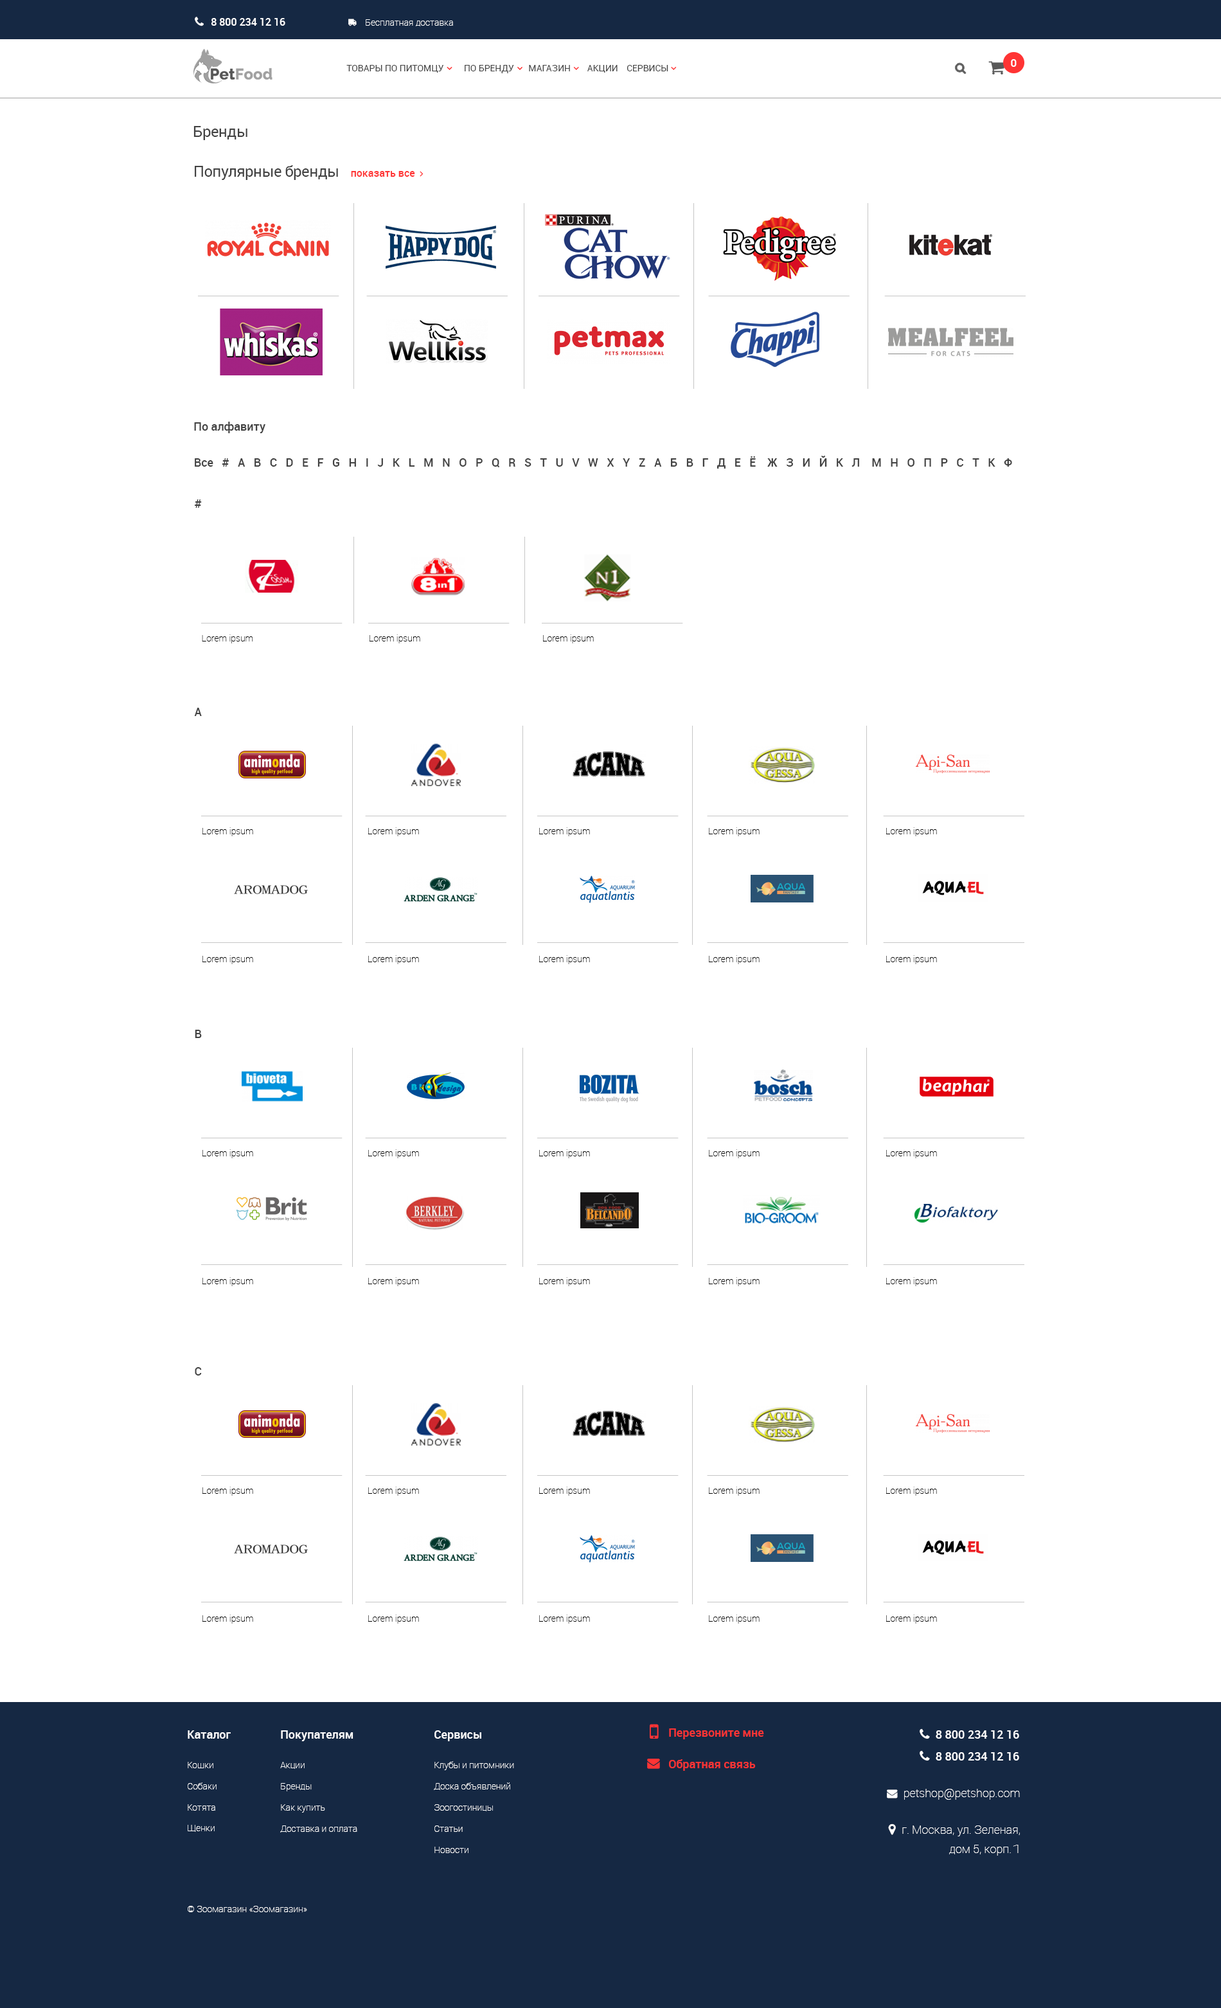
<style>
.page{position:relative;width:1221px;height:2008px;background:#ffffff}
.page>*{position:absolute;margin:0}
.t1{font:10.3px "Roboto-Medium";color:#ffffff}
.t2{font:9px "Roboto-Thin";color:#ffffff}
.t3{font:10.9px "Roboto-Light";color:#ffffff}
.t4{font:15.4px "Roboto-Regular";letter-spacing:-0.02em;color:#424242}
.t5{font:11.6px "Roboto-Medium";color:#424242}
.t6{font:11.6px "Roboto-Medium";color:#424242;text-transform:uppercase}
.t7{font:9px "Roboto-Thin";color:#000000}
.t8{font:9px/21.1px "Roboto-Thin";color:#ffffff}
.t9{font:11.6px/16.6px "Roboto-Medium";color:#ffffff}
.t10{font:9px/29.5px "Roboto-Thin";color:#ffffff}
.t11{font:9px/21.2px "Roboto-Thin";color:#ffffff}
.t12{font:9px/29.6px "Roboto-Thin";color:#ffffff}
.t13{font:11.6px "Roboto-Medium";color:#ff3434}
</style>
<div class="page">
<p class="t1" style="left:211px;top:18px;width:74px;height:8px">8 800 234 12 16</p>
<p class="t2" style="left:366px;top:19px;width:87px;height:7px">Бесплатная доставка</p>
<p class="t3" style="left:1011px;top:59px;width:6px;height:8px">0</p>
<p class="t4" style="left:194px;top:126px;width:54px;height:14px">Бренды</p>
<p class="t4" style="left:195px;top:165px;width:143px;height:15px">Популярные бренды</p>
<p class="t5" style="left:194px;top:422px;width:72px;height:11px">По алфавиту</p>
<p class="t6" style="left:195px;top:456px;width:818px;height:13px"><span class="t5">Все</span>   #   A   B   C   D   E   F   G   H   I   J   K   L   M   N   O   P   Q   R   S   T   U   V   W   X   Y   Z   А   Б   В   Г   Д   Е   Ё    Ж   З   И   Й   К   Л    М   Н   О   П   Р   с   т   к   ф</p>
<p class="t6" style="left:195px;top:500px;width:7px;height:8px">#</p>
<p class="t7" style="left:202px;top:634px;width:51px;height:10px">Lorem ipsum</p>
<p class="t7" style="left:370px;top:634px;width:50px;height:10px">Lorem ipsum</p>
<p class="t7" style="left:543px;top:634px;width:51px;height:10px">Lorem ipsum</p>
<p class="t6" style="left:194px;top:708px;width:8px;height:8px">A</p>
<p class="t7" style="left:203px;top:827px;width:50px;height:9px">Lorem ipsum</p>
<p class="t7" style="left:368px;top:827px;width:51px;height:9px">Lorem ipsum</p>
<p class="t7" style="left:539px;top:827px;width:51px;height:9px">Lorem ipsum</p>
<p class="t7" style="left:709px;top:827px;width:51px;height:9px">Lorem ipsum</p>
<p class="t7" style="left:887px;top:827px;width:50px;height:9px">Lorem ipsum</p>
<p class="t7" style="left:203px;top:955px;width:50px;height:9px">Lorem ipsum</p>
<p class="t7" style="left:368px;top:955px;width:51px;height:9px">Lorem ipsum</p>
<p class="t7" style="left:539px;top:955px;width:51px;height:9px">Lorem ipsum</p>
<p class="t7" style="left:709px;top:955px;width:51px;height:9px">Lorem ipsum</p>
<p class="t7" style="left:887px;top:955px;width:50px;height:9px">Lorem ipsum</p>
<p class="t6" style="left:195px;top:1030px;width:7px;height:8px">B</p>
<p class="t7" style="left:203px;top:1149px;width:50px;height:9px">Lorem ipsum</p>
<p class="t7" style="left:368px;top:1149px;width:51px;height:9px">Lorem ipsum</p>
<p class="t7" style="left:539px;top:1149px;width:51px;height:9px">Lorem ipsum</p>
<p class="t7" style="left:709px;top:1149px;width:51px;height:9px">Lorem ipsum</p>
<p class="t7" style="left:887px;top:1149px;width:50px;height:9px">Lorem ipsum</p>
<p class="t7" style="left:203px;top:1277px;width:50px;height:9px">Lorem ipsum</p>
<p class="t7" style="left:368px;top:1277px;width:51px;height:9px">Lorem ipsum</p>
<p class="t7" style="left:539px;top:1277px;width:51px;height:9px">Lorem ipsum</p>
<p class="t7" style="left:709px;top:1277px;width:51px;height:9px">Lorem ipsum</p>
<p class="t7" style="left:887px;top:1277px;width:50px;height:9px">Lorem ipsum</p>
<p class="t6" style="left:195px;top:1367px;width:7px;height:9px">C</p>
<p class="t7" style="left:203px;top:1487px;width:50px;height:9px">Lorem ipsum</p>
<p class="t7" style="left:368px;top:1487px;width:51px;height:9px">Lorem ipsum</p>
<p class="t7" style="left:539px;top:1487px;width:51px;height:9px">Lorem ipsum</p>
<p class="t7" style="left:709px;top:1487px;width:51px;height:9px">Lorem ipsum</p>
<p class="t7" style="left:887px;top:1487px;width:50px;height:9px">Lorem ipsum</p>
<p class="t7" style="left:203px;top:1615px;width:50px;height:9px">Lorem ipsum</p>
<p class="t7" style="left:368px;top:1615px;width:51px;height:9px">Lorem ipsum</p>
<p class="t7" style="left:539px;top:1615px;width:51px;height:9px">Lorem ipsum</p>
<p class="t7" style="left:709px;top:1615px;width:51px;height:9px">Lorem ipsum</p>
<p class="t7" style="left:887px;top:1615px;width:50px;height:9px">Lorem ipsum</p>
<p class="t8" style="left:188px;top:1731px;width:43px;height:101px"><span class="t9">Каталог<br></span><span class="t10">Кошки<br></span>Собаки<br>Котята<br>Щенки</p>
<p class="t11" style="left:280px;top:1731px;width:77px;height:102px"><span class="t9">Покупателям<br></span><span class="t12">Акции<br></span>Бренды<br>Как купить<br>Доставка и оплата</p>
<p class="t11" style="left:434px;top:1731px;width:80px;height:122px"><span class="t9">Сервисы<br></span><span class="t10">Клубы и питомники<br></span>Доска объявлений<br>Зоогостиницы<br>Статьи<br>Новости</p>
<p class="t13" style="left:669px;top:1729px;width:95px;height:11px">Перезвоните мне</p>
<p class="t13" style="left:669px;top:1760px;width:87px;height:11px">Обратная связь</p>
<p class="t2" style="left:188px;top:1906px;width:119px;height:7px">© Зоомагазин «Зоомагазин»</p>
</div>
